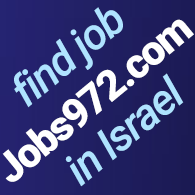
<style>
.page{position:relative;width:195px;height:195px}
.page>*{position:absolute;margin:0}
.t1{font:43.9px "Roboto-MediumItalic";letter-spacing:-0.04em;color:#afe3ff}
.t2{font:41.4px "Roboto-Black";letter-spacing:-0.04em;color:#ffffff}
</style>
<div class="page">
<p class="t1" style="left:14px;top:7px;width:109px;height:101px;rotate:-39deg">find job</p>
<p class="t2" style="left:2px;top:19px;width:192px;height:163px;rotate:-39deg">Jobs972.com</p>
<p class="t1" style="left:65px;top:73px;width:119px;height:114px;rotate:-39deg">in Israel</p>
</div>
